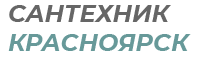
<style>
.page{position:relative;width:200px;height:57px;background:#ffffff}
.page>*{position:absolute;margin:0}
.t1{font:24px "Montserrat-BoldItalic";color:#679999}
.t2{font:24px "Montserrat-BoldItalic";color:#666666}
</style>
<div class="page">
<p class="t1" style="left:8px;top:5px;width:183px;height:46px"><span class="t2">САНТЕХНИК<br></span>КРАСНОЯРСК</p>
</div>
